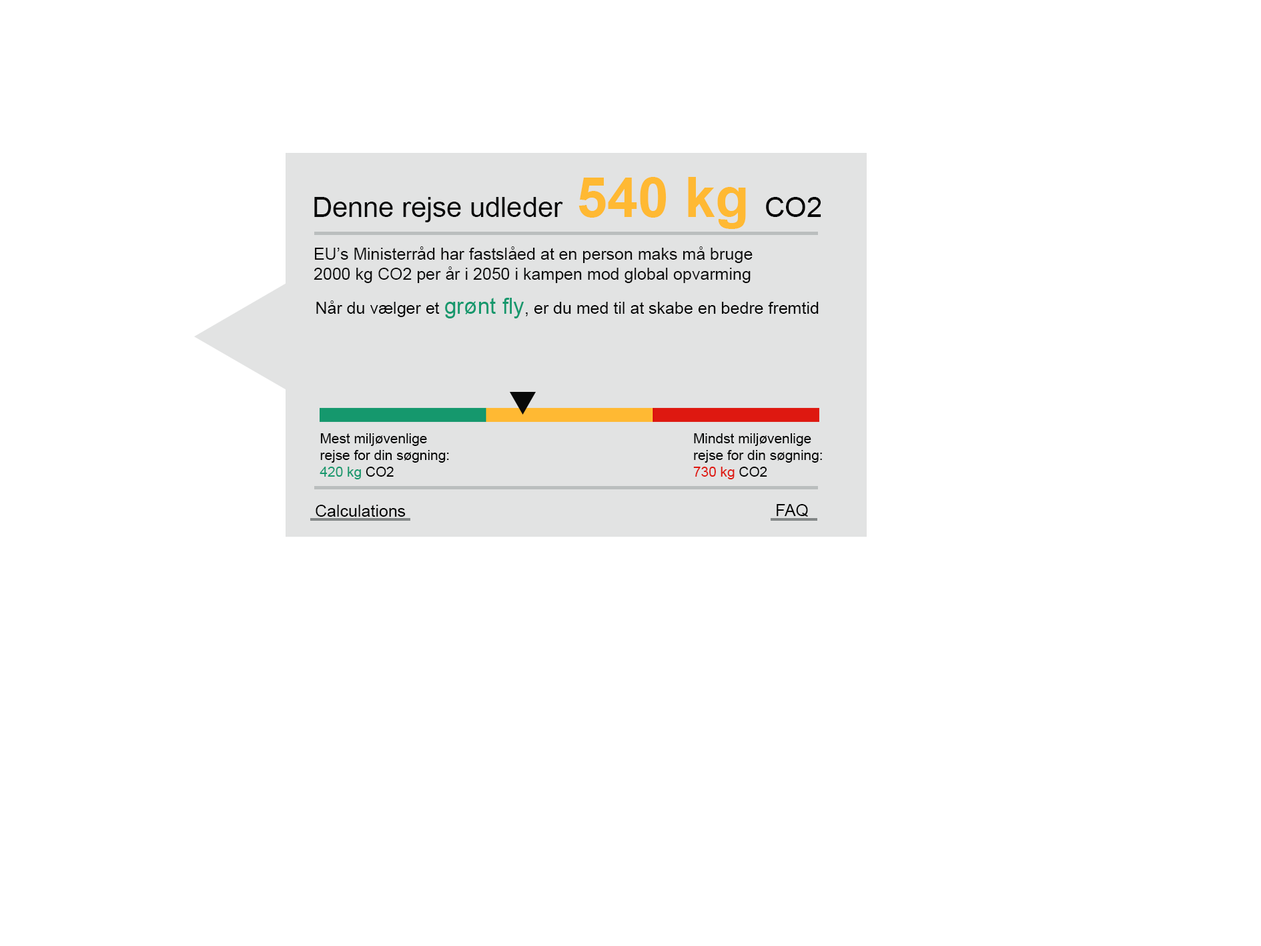
<style>
.page{position:relative;width:1261px;height:946px;background:#ffffff}
.page>*{position:absolute;margin:0}
.t1{font:27.8px "ArialMT";color:#070808}
.t2{font:55.6px "Arial-BoldMT";color:#ffb933}
.t3{font:27.8px "ArialMT";color:#000000}
.t4{font:16.7px "ArialMT";color:#0c0c0c}
.t5{font:16.7px "ArialMT";color:#030303}
.t6{font:22.2px "ArialMT";color:#15986d}
.t7{font:13.9px "ArialMT";color:#030303}
.t8{font:13.9px "ArialMT";color:#15986d}
.t9{font:13.9px "ArialMT";color:#de1810}
</style>
<div class="page">
<p class="t1" style="left:314px;top:177px;width:507px;height:52px">Denne rejse udleder  <span class="t2">540 kg </span><span class="t3">CO2</span></p>
<p class="t4" style="left:314px;top:246px;width:439px;height:37px">EU’s Ministerråd har fastslåed at en person maks må bruge <br>2000 kg CO2 per år i 2050 i kampen mod global opvarming</p>
<p class="t5" style="left:316px;top:298px;width:503px;height:20px">Når du vælger et <span class="t6">grønt fly</span>, er du med til at skabe en bedre fremtid</p>
<p class="t7" style="left:320px;top:433px;width:129px;height:46px">Mest miljøvenlige<br>rejse for din søgning:<br><span class="t8">420 kg</span> CO2</p>
<p class="t7" style="left:693px;top:433px;width:129px;height:46px">Mindst miljøvenlige<br>rejse for din søgning:<br><span class="t9">730 kg</span> CO2</p>
<p class="t5" style="left:316px;top:504px;width:90px;height:12px">Calculations</p>
<p class="t5" style="left:777px;top:504px;width:31px;height:12px">FAQ</p>
</div>
